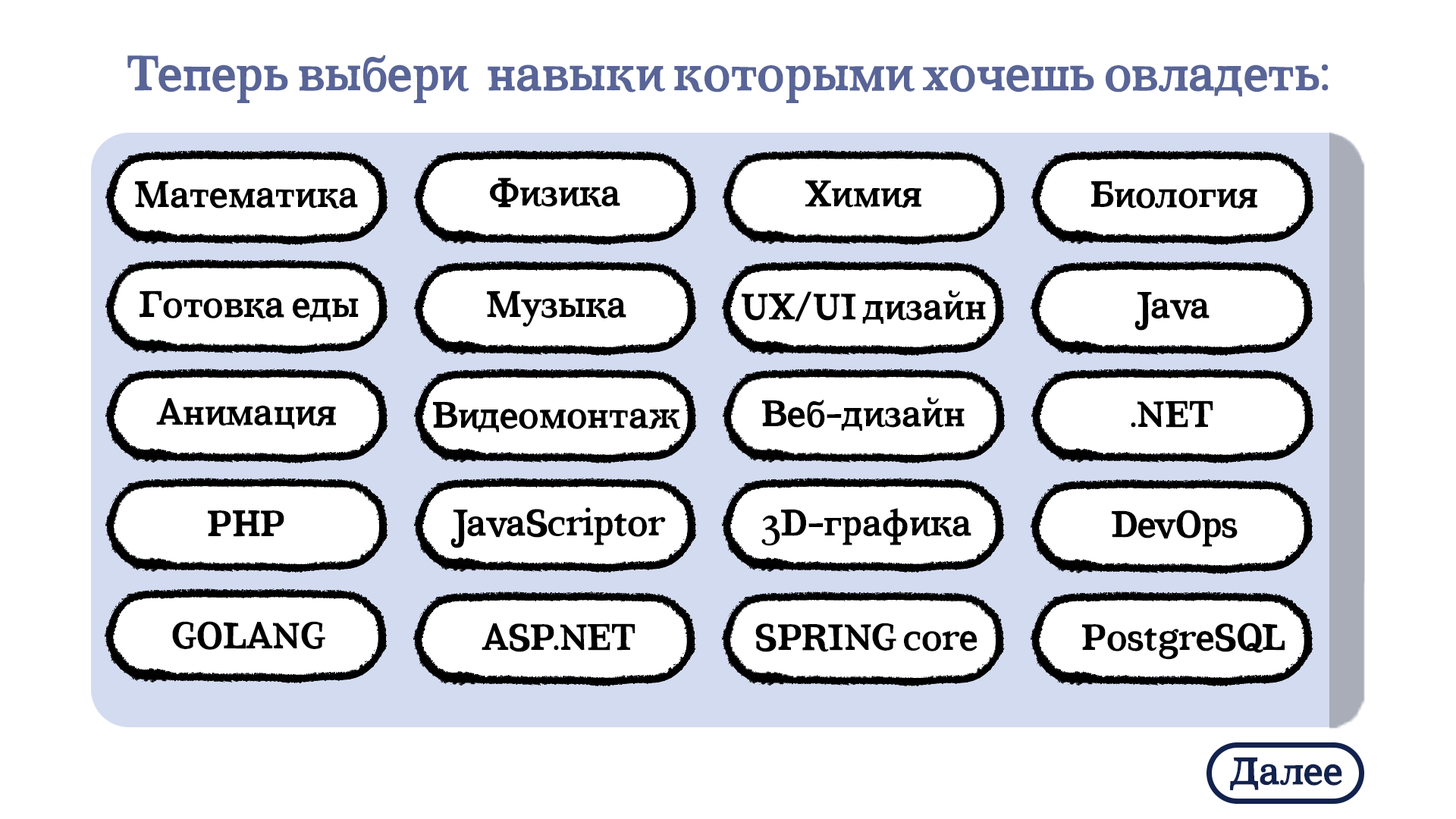
<style>
.page{position:relative;width:1456px;height:819px;background:#ffffff}
.page>*{position:absolute;margin:0}
.t1{font:48.5px "CoatsBold-Bold";color:#596597}
.t2{font:36.4px "CoatsBold-Bold";color:#000000}
.t3{font:38.3px "CoatsBold-Bold";color:#12224e}
</style>
<div class="page">
<p class="t1" style="left:127px;top:55px;width:1202px;height:48px">Теперь выбери  навыки которыми хочешь овладеть:</p>
<p class="t2" style="left:135px;top:180px;width:223px;height:29px">Математика</p>
<p class="t2" style="left:490px;top:177px;width:130px;height:31px">Физика</p>
<p class="t2" style="left:805px;top:180px;width:116px;height:28px">Химия</p>
<p class="t2" style="left:1091px;top:181px;width:166px;height:28px">Биология</p>
<p class="t2" style="left:140px;top:290px;width:219px;height:32px">Готовка еды</p>
<p class="t2" style="left:487px;top:290px;width:139px;height:37px">Музыка</p>
<p class="t2" style="left:742px;top:290px;width:244px;height:34px">UX/UI дизайн</p>
<p class="t2" style="left:1134px;top:292px;width:76px;height:39px">Java</p>
<p class="t2" style="left:156px;top:398px;width:180px;height:31px">Анимация</p>
<p class="t2" style="left:433px;top:402px;width:248px;height:30px">Видеомонтаж</p>
<p class="t2" style="left:762px;top:397px;width:203px;height:34px">Веб-дизайн</p>
<p class="t2" style="left:1131px;top:400px;width:82px;height:28px">.NET</p>
<p class="t2" style="left:450px;top:507px;width:216px;height:41px">JavaScriptor</p>
<p class="t2" style="left:761px;top:508px;width:210px;height:38px">3D-графика</p>
<p class="t2" style="left:1112px;top:510px;width:126px;height:37px">DevOps</p>
<p class="t2" style="left:208px;top:510px;width:76px;height:27px">PHP</p>
<p class="t2" style="left:172px;top:621px;width:153px;height:29px">GOLANG</p>
<p class="t2" style="left:482px;top:623px;width:153px;height:29px">ASP.NET</p>
<p class="t2" style="left:755px;top:623px;width:222px;height:29px">SPRING core</p>
<p class="t2" style="left:1082px;top:623px;width:203px;height:37px">PostgreSQL</p>
<p class="t3" style="left:1230px;top:757px;width:112px;height:33px">Дaлее</p>
</div>
